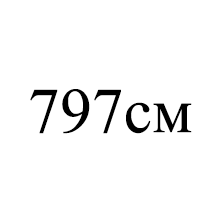
<style>
.page{position:relative;width:221px;height:221px;background:#ffffff}
.page>*{position:absolute;margin:0}
.t1{font:63.9px "TimesNewRomanPSMT";color:#000000}
</style>
<div class="page">
<p class="t1" style="left:30px;top:89px;width:162px;height:45px">797см</p>
</div>
